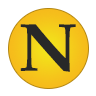
<style>
.page{position:relative;width:96px;height:96px;background:#ffffff}
.page>*{position:absolute;margin:0}
.t1{font:68.6px "Palatino-Bold";color:#282828;scale:1.05 1}
</style>
<div class="page">
<p class="t1" style="left:20px;top:24px;width:56px;height:48px">N</p>
</div>
